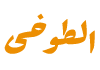
<style>
.page{position:relative;width:100px;height:70px;background:#ffffff}
.page>*{position:absolute;margin:0}
.t1{font:37.9px "Rakkas-Regular";color:#ec8e02;text-transform:uppercase}
</style>
<div class="page">
<p class="t1" style="left:4px;top:13px;width:91px;height:41px">الطوخى</p>
</div>
